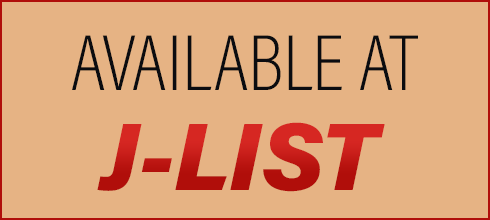
<style>
.page{position:relative;width:490px;height:220px;background:#e6b384}
.page>*{position:absolute;margin:0}
.t1{font:80px "AcuminConcept-CondensedExtraLight";color:#0b0c10}
.t2{font:96px "AcuminConcept-BlackItalic";color:#c21915}
</style>
<div class="page">
<p class="t1" style="left:72px;top:35px;width:346px;height:55px">AVAILABLE AT</p>
<p class="t2" style="left:97px;top:122px;width:288px;height:70px">J-LIST</p>
</div>
